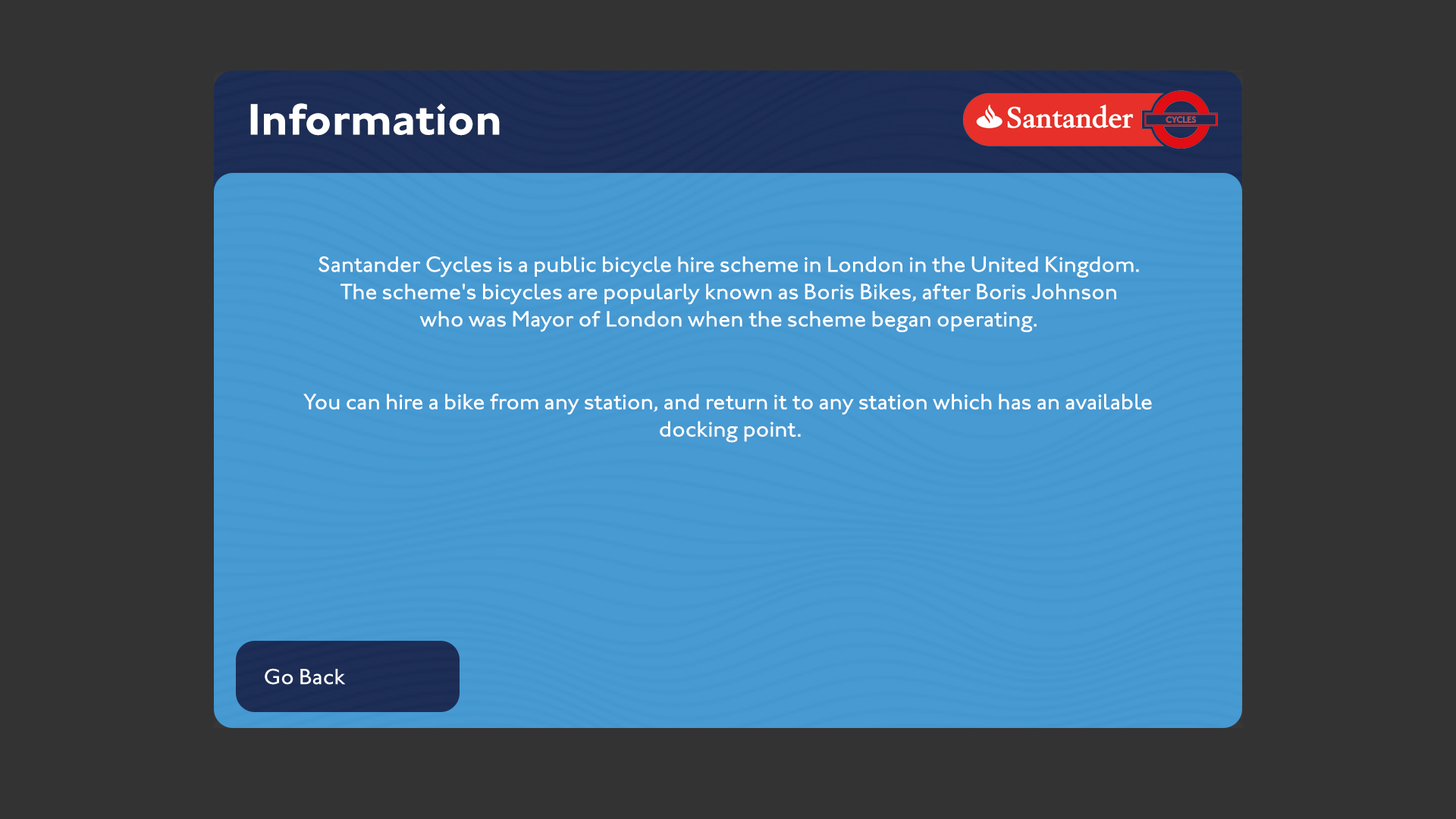
<style>
.page{position:relative;width:1456px;height:819px;background:#333333}
.page>*{position:absolute;margin:0}
.t1{font:45.5px "JohnstonITCStd-Bold";color:#ffffff}
.t2{font:22.7px "JohnstonITCStd-Medium";color:#ffffff}
</style>
<div class="page">
<p class="t1" style="left:250px;top:103px;width:250px;height:33px">Information</p>
<p class="t2" style="left:318px;top:256px;width:821px;height:76px;text-align:center">Santander Cycles is a public bicycle hire scheme in London in the United Kingdom. <br>The scheme's bicycles are popularly known as Boris Bikes, after Boris Johnson <br>who was Mayor of London when the scheme began operating.</p>
<p class="t2" style="left:303px;top:394px;width:849px;height:49px;text-align:center">You can hire a bike from any station, and return it to any station which has an available <br>docking point.</p>
</div>
